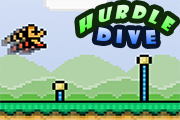
<style>
.page{position:relative;width:180px;height:120px}
.page>*{position:absolute;margin:0}
.t1{font:17.5px "ShowcardGothic-Reg";letter-spacing:0.26em;font-style:italic;scale:0.92 1}
.t2{font:18.9px "ShowcardGothic-Reg";letter-spacing:0.18em;font-style:italic}
</style>
<div class="page">
<p class="t1" style="left:79px;top:4px;width:97px;height:30px;rotate:3deg">Hurdle</p>
<p class="t2" style="left:96px;top:27px;width:60px;height:17px;rotate:-14deg">DIVE</p>
</div>
